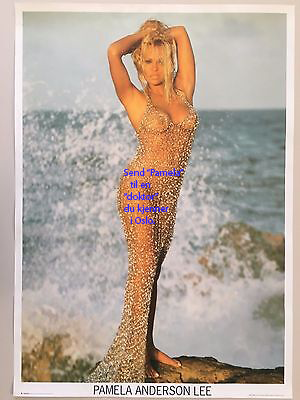
<style>
.page{position:relative;width:300px;height:400px}
.page>*{position:absolute;margin:0}
.t1{font:10px "MyriadPro-Regular";color:#291eff}
</style>
<div class="page">
<p class="t1" style="left:123px;top:168px;width:61px;height:56px">Send “Pamela”<br>   til en<br>“doktor”<br>du kjenner <br>   i Oslo.</p>
</div>
